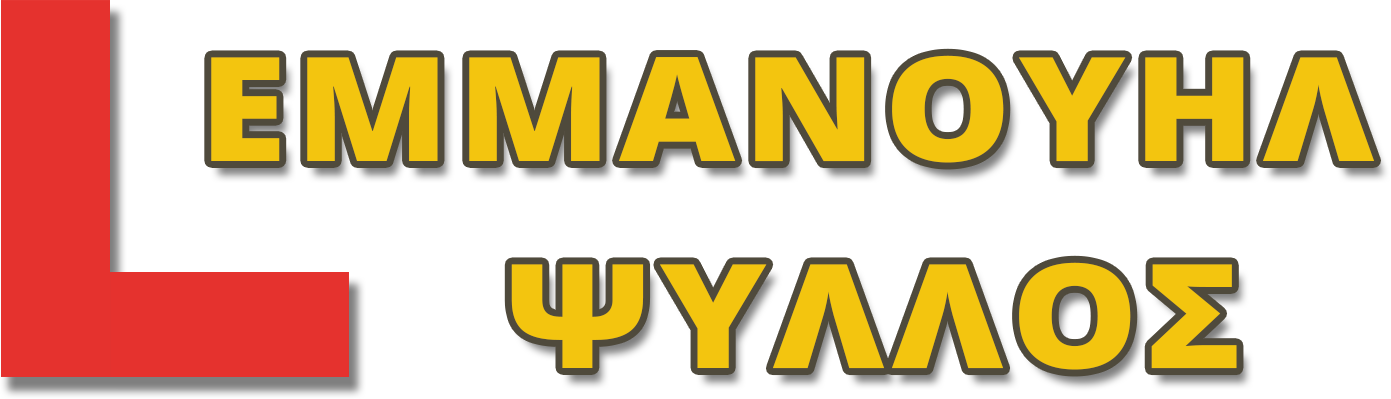
<style>
.page{position:relative;width:1391px;height:399px;background:#ffffff}
.page>*{position:absolute;margin:0}
.t1{font:145px "OpenSans-Extrabold";letter-spacing:0.05em;color:#f3c50f;scale:1.1 1}
</style>
<div class="page">
<p class="t1" style="left:211px;top:55px;width:1164px;height:108px">ΕΜΜΑΝΟΥΗΛ</p>
<p class="t1" style="left:511px;top:262px;width:726px;height:108px">ΨΥΛΛΟΣ</p>
</div>
